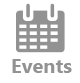
<style>
.page{position:relative;width:80px;height:83px;background:#ffffff}
.page>*{position:absolute;margin:0}
.t1{font:20px "SegoeUI-Bold";color:#929292}
</style>
<div class="page">
<p class="t1" style="left:12px;top:59px;width:60px;height:14px">Events</p>
</div>
